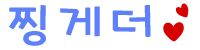
<style>
.page{position:relative;width:200px;height:50px;background:#ffffff}
.page>*{position:absolute;margin:0}
.t1{font:45.5px "Goyang";letter-spacing:0.12em;color:#5e80fb;font-weight:bold;scale:1.19 1}
.t2{font:24px "Goyang";letter-spacing:0.12em;color:#d70000;font-weight:bold;scale:1.19 1}
.t3{font:17px "Goyang";letter-spacing:0.12em;color:#d70000;font-weight:bold}
</style>
<div class="page">
<p class="t1" style="left:9px;top:5px;width:175px;height:41px">찡게더<span class="t2">♥</span></p>
<p class="t3" style="left:176px;top:3px;width:13px;height:15px;rotate:-30deg">♥</p>
</div>
